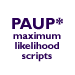
<style>
.page{position:relative;width:75px;height:75px;background:#ffffff}
.page>*{position:absolute;margin:0}
.t1{font:10px "GillSansMT-Bold";color:#2a0055}
.t2{font:16px "GillSansMT-Bold";color:#2a0055}
</style>
<div class="page">
<p class="t1" style="left:12px;top:17px;width:51px;height:45px;text-align:center"><span class="t2">PAUP*<br></span>maximum <br>likelihood<br>scripts</p>
</div>
